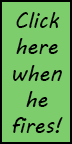
<style>
.page{position:relative;width:72px;height:144px;background:#7dcd6d}
.page>*{position:absolute;margin:0}
.t1{font:22px "MVBoli";color:#000000}
.t2{font:12px "MVBoli";color:#000000}
</style>
<div class="page">
<p class="t1" style="left:12px;top:12px;width:51px;height:121px;text-align:center"><span class="t2"><br></span>Click<br>here<br>when<br>he<br>fires!</p>
</div>
